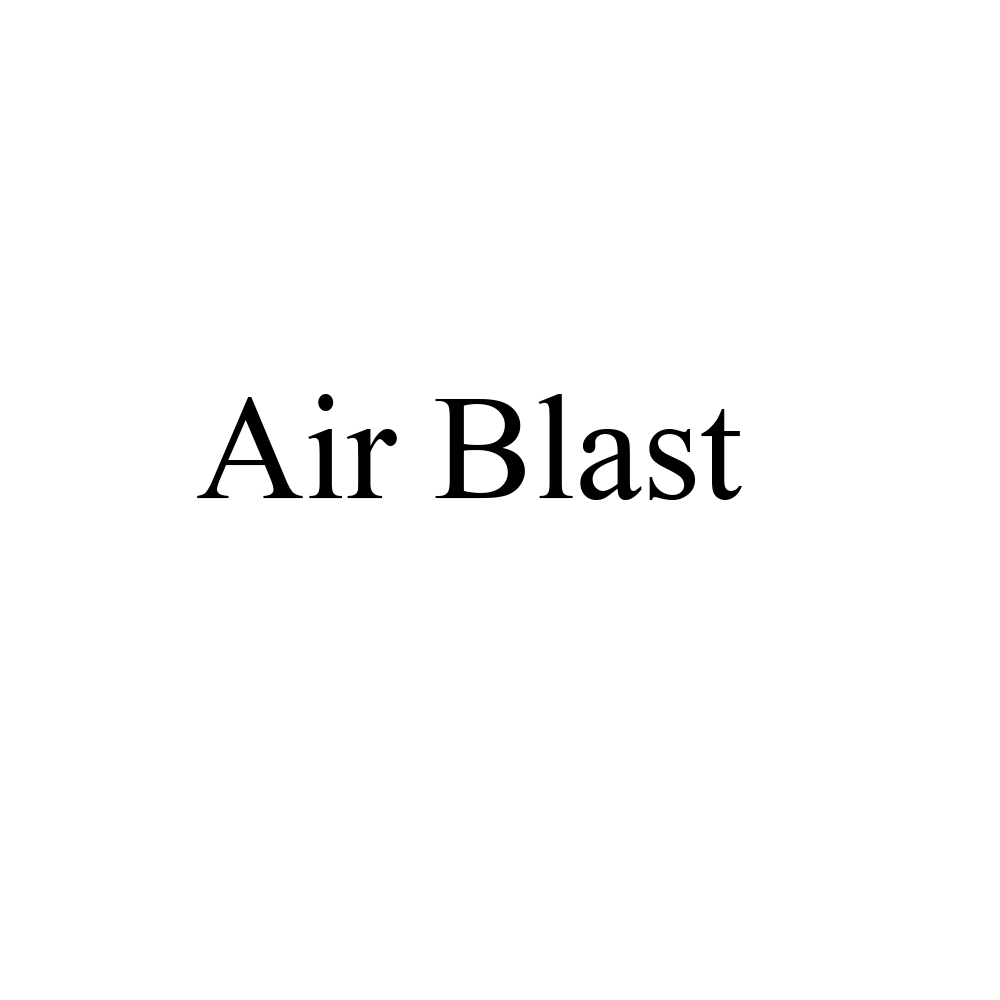
<style>
.page{position:relative;width:1000px;height:1000px;background:#ffffff}
.page>*{position:absolute;margin:0}
.t1{font:150px "TimesNewRomanPSMT";color:#000000}
</style>
<div class="page">
<p class="t1" style="left:197px;top:394px;width:545px;height:106px">Air Blast</p>
</div>
